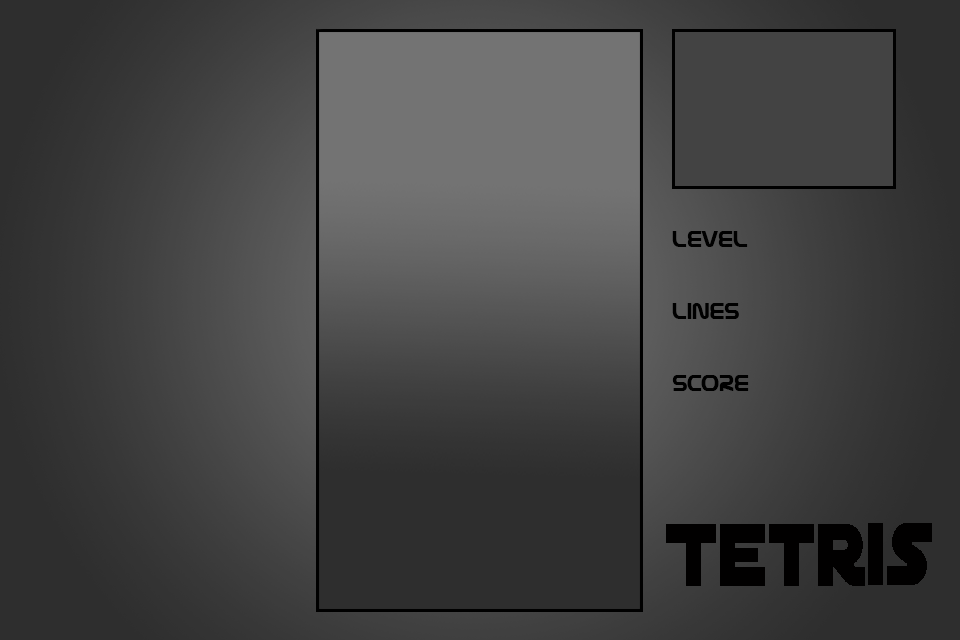
<style>
.page{position:relative;width:960px;height:640px}
.page>*{position:absolute;margin:0}
.t1{font:24px/72px "Nasalization";color:#000000}
.t2{font:94.9px "DistantGalaxy";color:#010000;scale:0.8 1}
</style>
<div class="page">
<p class="t1" style="left:672px;top:231px;width:77px;height:160px">LEVEL<br>LINES<br>SCORE</p>
<p class="t2" style="left:666px;top:523px;width:266px;height:63px">Tetris</p>
</div>
